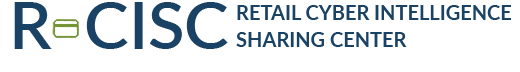
<style>
.page{position:relative;width:520px;height:72px;background:#ffffff}
.page>*{position:absolute;margin:0}
.t1{font:66.5px "Lato-Semibold";color:#1a4265}
.t2{font:19.9px/26.6px "Lato-Bold";color:#1a4265}
</style>
<div class="page">
<p class="t1" style="left:14px;top:2px;width:214px;height:47px">R  CISC</p>
<p class="t2" style="left:236px;top:5px;width:275px;height:42px">RETAIL CYBER INTELLIGENCE<br>SHARING CENTER</p>
</div>
